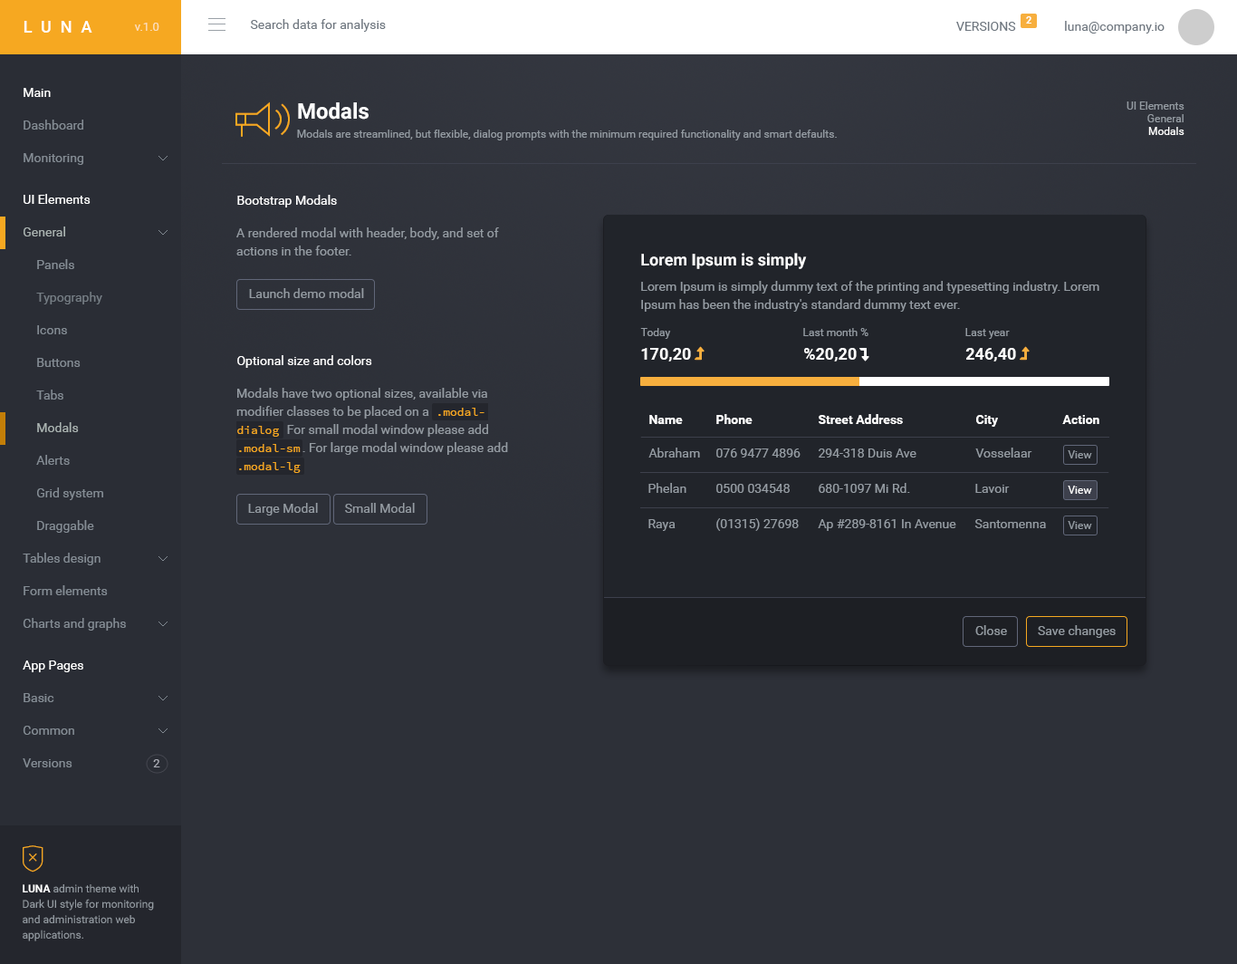
<style>
.page{position:relative;width:1237px;height:964px;background:#2d3038}
.page>*{position:absolute;margin:0}
.t1{font:10px "Roboto-Bold";color:#ffffff}
.t2{font:16.3px "Roboto-Medium";letter-spacing:0.55em;color:#ffffff}
.t3{font:11.8px "Roboto-Regular";color:#fbdfbc}
.t4{font:12.7px "Roboto-Regular";color:#6f7780}
.t5{font:12.7px "Roboto-Regular";color:#ffffff}
.t6{font:10.9px/12.7px "Roboto-Regular";color:#949ba2}
.t7{font:10.9px/12.7px "Roboto-Regular";color:#ffffff}
.t8{font:21.7px "Roboto-Bold";color:#ffffff}
.t9{font:12.7px "Roboto-Regular";color:#848c94}
.t10{font:10.9px "Roboto-Regular";color:#949ba2}
.t11{font:12.7px "Roboto-Regular";color:#a9b2b0}
.t12{font:12.7px/18.1px "Roboto-Regular";color:#949ba2}
.t13{font:16.3px "Roboto-Bold";color:#ffffff}
.t14{font:12.7px "Roboto-Regular";color:#757d84}
.t15{font:12.7px "Roboto-Regular";color:#949ba2}
.t16{font:11.8px "SourceCodePro-Regular";color:#f6a821}
.t17{font:12.7px "Roboto-Bold";color:#ffffff}
.t18{font:10.9px "Roboto-Regular";color:#ffffff}
.t19{font:11.8px "Roboto-Regular";color:#aaacb5}
.t20{font:10.9px/15.4px "Roboto-Regular";color:#949ba2}
.t21{font:10.9px/15.4px "Roboto-Bold";color:#ffffff}
</style>
<div class="page">
<p class="t1" style="left:1026px;top:16px;width:6px;height:8px">2</p>
<p class="t2" style="left:24px;top:21px;width:68px;height:12px">LUNA</p>
<p class="t3" style="left:134px;top:23px;width:25px;height:8px">v.1.0</p>
<p class="t4" style="left:250px;top:19px;width:136px;height:13px">Search data for analysis</p>
<p class="t4" style="left:956px;top:22px;width:60px;height:9px">VERSIONS</p>
<p class="t4" style="left:1065px;top:21px;width:100px;height:13px">luna@company.io</p>
<p class="t5" style="left:24px;top:88px;width:27px;height:9px">Main</p>
<p class="t6" style="left:1127px;top:101px;width:58px;height:34px;text-align:right">UI Elements<br>General<br><span class="t7">Modals</span></p>
<p class="t8" style="left:298px;top:102px;width:71px;height:18px">Modals</p>
<p class="t9" style="left:24px;top:120px;width:59px;height:10px">Dashboard</p>
<p class="t10" style="left:297px;top:130px;width:540px;height:10px">Modals are streamlined, but flexible, dialog prompts with the minimum required functionality and smart defaults.</p>
<p class="t9" style="left:24px;top:153px;width:59px;height:12px">Monitoring</p>
<p class="t5" style="left:24px;top:194px;width:67px;height:10px">UI Elements</p>
<p class="t5" style="left:237px;top:195px;width:100px;height:12px">Bootstrap Modals</p>
<p class="t11" style="left:24px;top:226px;width:41px;height:10px">General</p>
<p class="t12" style="left:236px;top:227px;width:263px;height:28px">A rendered modal with header, body, and set of actions in the footer.</p>
<p class="t13" style="left:641px;top:253px;width:166px;height:16px">Lorem Ipsum is simply</p>
<p class="t9" style="left:37px;top:259px;width:37px;height:10px">Panels</p>
<p class="t12" style="left:641px;top:281px;width:459px;height:31px">Lorem Ipsum is simply dummy text of the printing and typesetting industry. Lorem Ipsum has been the industry's standard dummy text ever.</p>
<p class="t14" style="left:36px;top:292px;width:66px;height:12px">Typography</p>
<p class="t15" style="left:249px;top:288px;width:115px;height:10px">Launch demo modal</p>
<p class="t9" style="left:37px;top:325px;width:30px;height:9px">Icons</p>
<p class="t10" style="left:640px;top:328px;width:31px;height:11px">Today</p>
<p class="t10" style="left:803px;top:328px;width:66px;height:8px">Last month %</p>
<p class="t10" style="left:966px;top:328px;width:44px;height:11px">Last year</p>
<p class="t13" style="left:641px;top:348px;width:50px;height:13px">170,20</p>
<p class="t13" style="left:804px;top:348px;width:53px;height:13px">%20,20</p>
<p class="t13" style="left:966px;top:348px;width:50px;height:13px">246,40</p>
<p class="t9" style="left:37px;top:358px;width:44px;height:9px">Buttons</p>
<p class="t5" style="left:237px;top:355px;width:135px;height:13px">Optional size and colors</p>
<p class="t9" style="left:36px;top:389px;width:27px;height:10px">Tabs</p>
<p class="t12" style="left:236px;top:388px;width:272px;height:67px">Modals have two optional sizes, available via modifier classes to be placed on a        <br>             .  For small modal window please add <br>                     . For large modal window please add</p>
<p class="t16" style="left:438px;top:408px;width:47px;height:8px">.modal-</p>
<p class="t17" style="left:716px;top:414px;width:37px;height:10px">Phone</p>
<p class="t17" style="left:819px;top:414px;width:84px;height:10px">Street Address</p>
<p class="t11" style="left:37px;top:422px;width:42px;height:10px">Modals</p>
<p class="t16" style="left:237px;top:426px;width:42px;height:11px">dialog</p>
<p class="t17" style="left:649px;top:415px;width:34px;height:9px">Name</p>
<p class="t17" style="left:976px;top:415px;width:22px;height:12px">City</p>
<p class="t17" style="left:1062px;top:415px;width:38px;height:9px">Action</p>
<p class="t16" style="left:239px;top:444px;width:62px;height:8px">.modal-sm</p>
<p class="t15" style="left:649px;top:447px;width:51px;height:10px">Abraham</p>
<p class="t15" style="left:716px;top:448px;width:85px;height:9px">076 9477 4896</p>
<p class="t15" style="left:819px;top:448px;width:98px;height:9px">294-318 Duis Ave</p>
<p class="t15" style="left:976px;top:447px;width:57px;height:10px">Vosselaar</p>
<p class="t9" style="left:36px;top:455px;width:34px;height:10px">Alerts</p>
<p class="t16" style="left:239px;top:462px;width:62px;height:11px">.modal-lg</p>
<p class="t10" style="left:1068px;top:450px;width:24px;height:8px">View</p>
<p class="t15" style="left:649px;top:483px;width:38px;height:10px">Phelan</p>
<p class="t15" style="left:716px;top:484px;width:74px;height:9px">0500 034548</p>
<p class="t15" style="left:819px;top:483px;width:91px;height:10px">680-1097 Mi Rd.</p>
<p class="t15" style="left:976px;top:484px;width:34px;height:9px">Lavoir</p>
<p class="t18" style="left:1068px;top:485px;width:24px;height:9px">View</p>
<p class="t9" style="left:37px;top:487px;width:66px;height:13px">Grid system</p>
<p class="t15" style="left:248px;top:503px;width:70px;height:12px">Large Modal</p>
<p class="t15" style="left:345px;top:503px;width:70px;height:10px">Small Modal</p>
<p class="t9" style="left:37px;top:520px;width:57px;height:13px">Draggable</p>
<p class="t15" style="left:649px;top:519px;width:27px;height:12px">Raya</p>
<p class="t15" style="left:716px;top:518px;width:83px;height:13px">(01315) 27698</p>
<p class="t15" style="left:818px;top:519px;width:138px;height:12px">Ap #289-8161 In Avenue</p>
<p class="t15" style="left:975px;top:519px;width:71px;height:9px">Santomenna</p>
<p class="t10" style="left:1068px;top:521px;width:24px;height:8px">View</p>
<p class="t9" style="left:23px;top:553px;width:78px;height:12px">Tables design</p>
<p class="t9" style="left:24px;top:585px;width:84px;height:10px">Form elements</p>
<p class="t9" style="left:23px;top:618px;width:103px;height:12px">Charts and graphs</p>
<p class="t15" style="left:976px;top:625px;width:31px;height:10px">Close</p>
<p class="t15" style="left:1038px;top:625px;width:78px;height:13px">Save changes</p>
<p class="t5" style="left:23px;top:660px;width:60px;height:12px">App Pages</p>
<p class="t9" style="left:24px;top:693px;width:30px;height:9px">Basic</p>
<p class="t9" style="left:23px;top:726px;width:51px;height:9px">Common</p>
<p class="t9" style="left:23px;top:758px;width:49px;height:9px">Versions</p>
<p class="t19" style="left:153px;top:759px;width:7px;height:8px">2</p>
<p class="t20" style="left:23px;top:884px;width:131px;height:57px"><span class="t21">LUNA </span>admin theme with Dark UI style for monitoring and administration web applications.</p>
</div>
